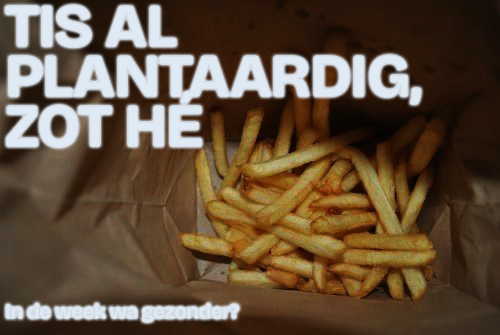
<style>
.page{position:relative;width:500px;height:335px}
.page>*{position:absolute;margin:0}
.t1{font:60px/50px "BricolageGrotesque-Bold";letter-spacing:-0.02em;color:#e0eaf4}
.t2{font:20px "BricolageGrotesque-Bold";letter-spacing:-0.02em;color:#e0eaf4}
</style>
<div class="page">
<p class="t1" style="left:6px;top:5px;width:415px;height:142px">TIS AL <br>PLANTAARDIG,<br>ZOT HÉ</p>
<p class="t2" style="left:6px;top:303px;width:233px;height:19px">In de week wa gezonder?</p>
</div>
